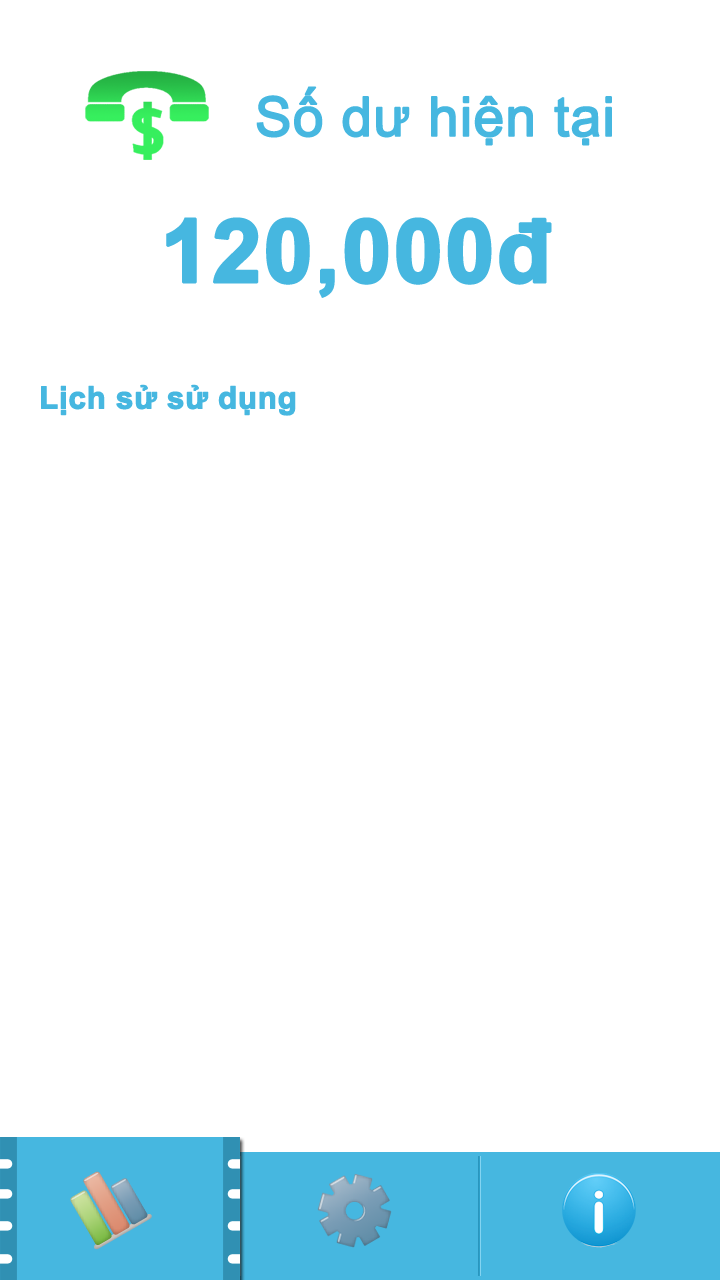
<style>
.page{position:relative;width:720px;height:1280px;background:#ffffff}
.page>*{position:absolute;margin:0}
.t1{font:54.7px "ArialMT";color:#46b7e0;font-weight:bold}
.t2{font:88.4px "Arial-BoldMT";color:#46b7e0;font-weight:bold}
.t3{font:31.1px "Arial-BoldMT";color:#46b7e0;font-weight:bold}
</style>
<div class="page">
<p class="t1" style="left:256px;top:86px;width:356px;height:60px">Số dư hiện tại</p>
<p class="t2" style="left:166px;top:217px;width:386px;height:81px">120,000đ</p>
<p class="t3" style="left:41px;top:384px;width:255px;height:32px">Lịch sử sử dụng</p>
</div>
